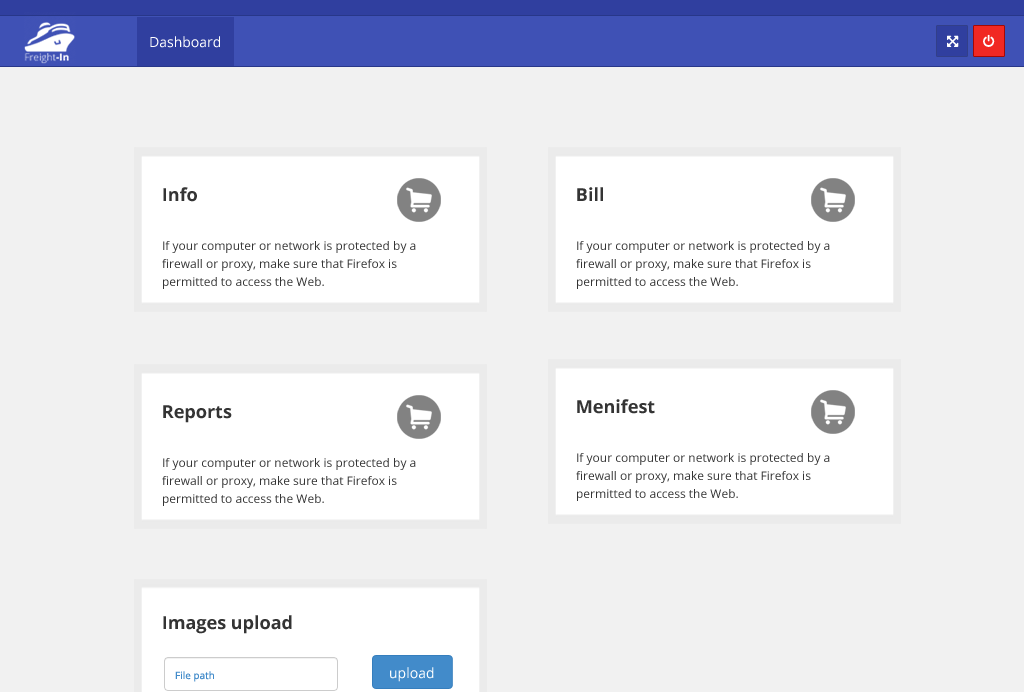
<style>
.page{position:relative;width:1024px;height:692px;background:#f1f1f1}
.page>*{position:absolute;margin:0}
.t1{font:14px "OpenSans";color:#ffffff}
.t2{font:18px "OpenSans-Bold";color:#343434}
.t3{font:12px/18px "OpenSans";color:#343434}
.t4{font:10px "OpenSans";color:#428bca}
</style>
<div class="page">
<p class="t1" style="left:150px;top:36px;width:70px;height:12px">Dashboard</p>
<p class="t2" style="left:163px;top:187px;width:34px;height:15px">Info</p>
<p class="t2" style="left:577px;top:187px;width:26px;height:14px">Bill</p>
<p class="t3" style="left:162px;top:241px;width:254px;height:48px">If your computer or network is protected by a firewall or proxy, make sure that Firefox is permitted to access the Web.</p>
<p class="t3" style="left:576px;top:241px;width:254px;height:48px">If your computer or network is protected by a firewall or proxy, make sure that Firefox is permitted to access the Web.</p>
<p class="t2" style="left:577px;top:399px;width:78px;height:15px">Menifest</p>
<p class="t2" style="left:163px;top:405px;width:69px;height:18px">Reports</p>
<p class="t3" style="left:162px;top:458px;width:254px;height:48px">If your computer or network is protected by a firewall or proxy, make sure that Firefox is permitted to access the Web.</p>
<p class="t3" style="left:576px;top:453px;width:254px;height:48px">If your computer or network is protected by a firewall or proxy, make sure that Firefox is permitted to access the Web.</p>
<p class="t2" style="left:163px;top:615px;width:129px;height:19px">Images upload</p>
<p class="t4" style="left:175px;top:671px;width:39px;height:11px">File path</p>
<p class="t1" style="left:390px;top:667px;width:44px;height:15px">upload</p>
</div>
